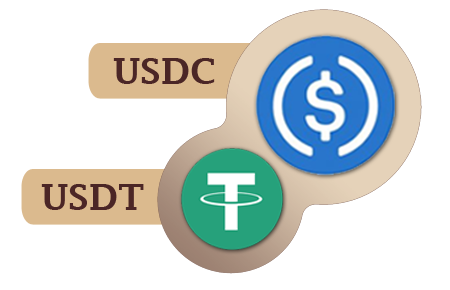
<style>
.page{position:relative;width:450px;height:290px;background:#ffffff}
.page>*{position:absolute;margin:0}
.t1{font:36px "LucidaFax-Demi";color:#4b2626}
</style>
<div class="page">
<p class="t1" style="left:113px;top:58px;width:102px;height:26px">USDC</p>
<p class="t1" style="left:41px;top:184px;width:103px;height:26px">USDT</p>
</div>
